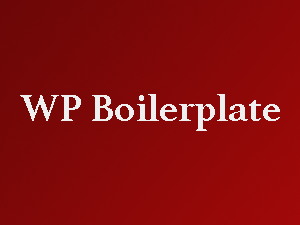
<style>
.page{position:relative;width:300px;height:225px}
.page>*{position:absolute;margin:0}
.t1{font:40px "Athelas-Bold";color:#efefef}
</style>
<div class="page">
<p class="t1" style="left:20px;top:94px;width:260px;height:37px">WP Boilerplate</p>
</div>
